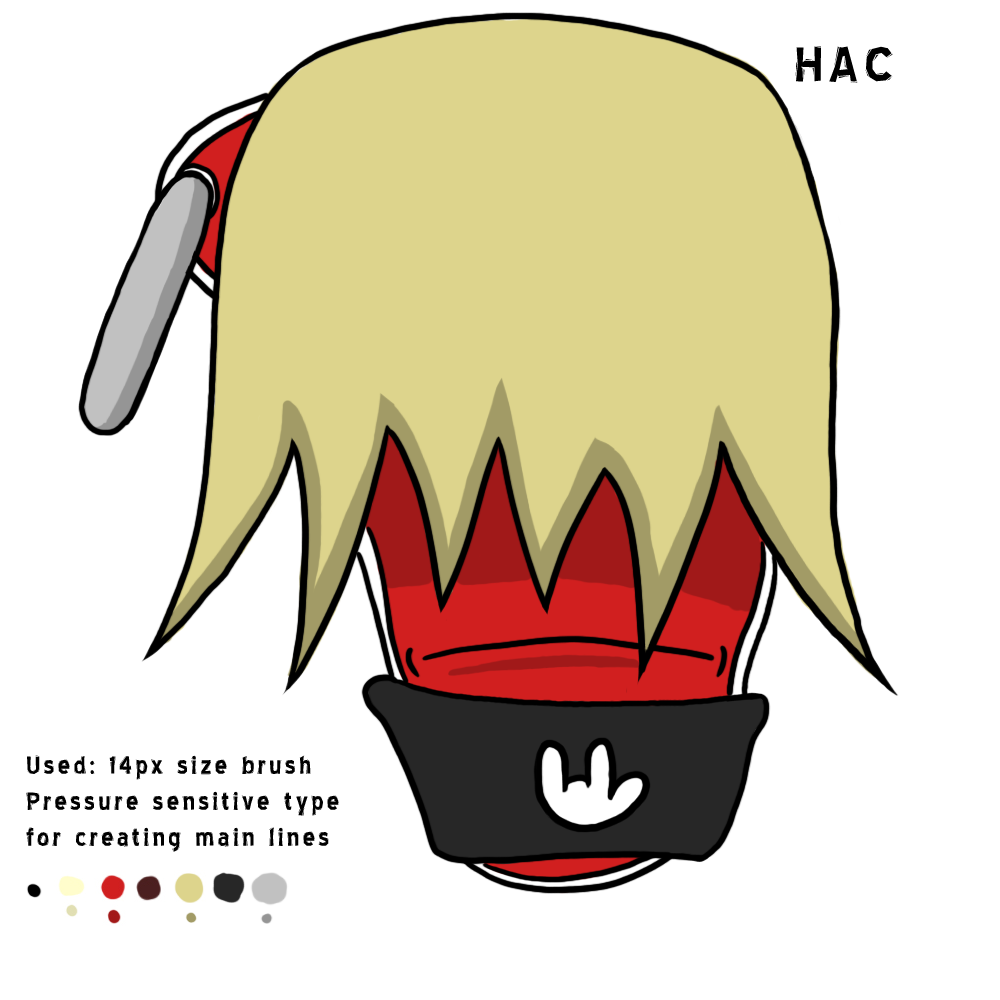
<style>
.page{position:relative;width:1000px;height:1000px;background:#ffffff}
.page>*{position:absolute;margin:0}
.t1{font:60px "BlueHighwayLinocut";letter-spacing:0.1em;color:#000000}
.t2{font:30px "BlueHighwayLinocut";letter-spacing:0.1em;color:#000000}
</style>
<div class="page">
<p class="t1" style="left:795px;top:46px;width:98px;height:37px">HAC</p>
<p class="t2" style="left:26px;top:755px;width:313px;height:97px">Used: 14px size brush<br>Pressure sensitive type<br>for creating main lines</p>
</div>
